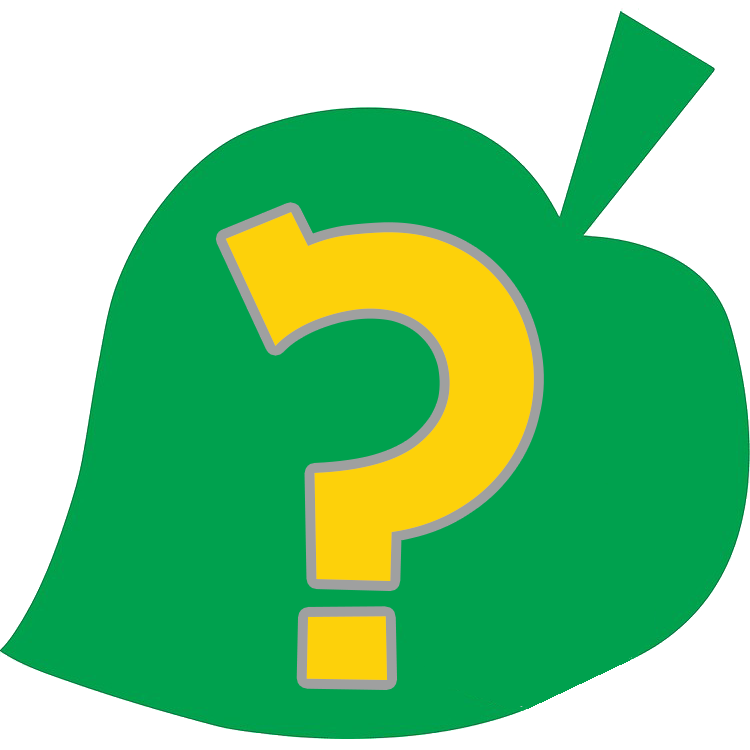
<style>
.page{position:relative;width:750px;height:750px;background:#00a14e}
.page>*{position:absolute;margin:0}
.t1{font:652.5px "FinkHeavy";color:#fdd10a}
</style>
<div class="page">
<p class="t1" style="left:225px;top:212px;width:309px;height:468px">?</p>
</div>
